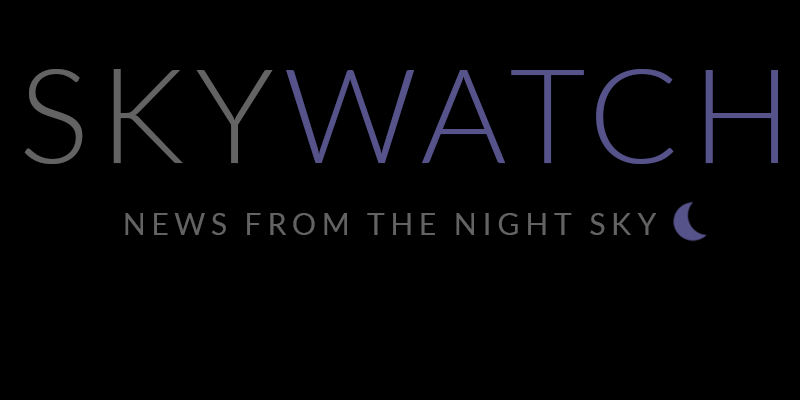
<style>
.page{position:relative;width:800px;height:400px;background:#000000}
.page>*{position:absolute;margin:0}
.t1{font:131.5px "Lato-Light";letter-spacing:0.08em}
.t2{font:29.9px "Lato-Regular";letter-spacing:0.2em;color:#636363}
</style>
<div class="page">
<p class="t1" style="left:24px;top:69px;width:754px;height:95px">SKYWATCH</p>
<p class="t2" style="left:125px;top:213px;width:532px;height:22px">NEWS FROM THE NIGHT SKY</p>
</div>
